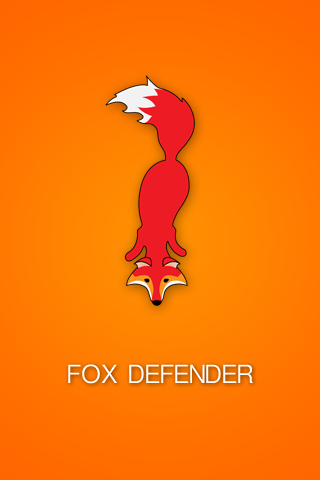
<style>
.page{position:relative;width:320px;height:480px}
.page>*{position:absolute;margin:0}
.t1{font:35px "Meera";color:#ffffff;text-transform:uppercase}
</style>
<div class="page">
<p class="t1" style="left:68px;top:364px;width:185px;height:20px">Fox Defender</p>
</div>
